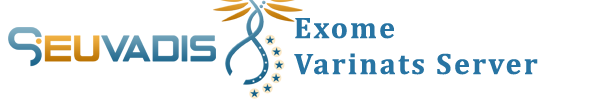
<style>
.page{position:relative;width:600px;height:100px;background:#ffffff}
.page>*{position:absolute;margin:0}
.t1{font:30px "Cambria-Bold";letter-spacing:0.075em;color:#2774a3}
</style>
<div class="page">
<p class="t1" style="left:294px;top:18px;width:244px;height:57px">Exome<br>Varinats Server</p>
</div>
